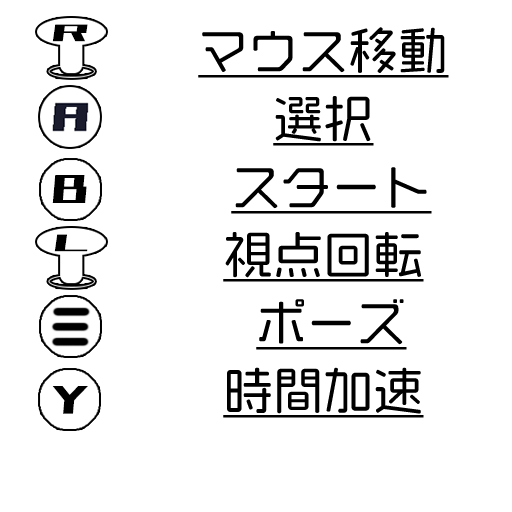
<style>
.page{position:relative;width:512px;height:512px;background:#ffffff}
.page>*{position:absolute;margin:0}
.t1{font:29.7px "851Gkktt";color:#000000;scale:1.65 1}
.t2{font:50px "VDL-GigaMaru-Medium";color:#000000;text-decoration:underline}
.t3{font:49.1px "851Gkktt";color:#000000}
</style>
<div class="page">
<p class="t1" style="left:52px;top:24px;width:36px;height:18px">R</p>
<p class="t2" style="left:198px;top:27px;width:251px;height:51px">マウス移動</p>
<p class="t2" style="left:273px;top:96px;width:101px;height:50px">選択</p>
<p class="t2" style="left:231px;top:167px;width:201px;height:47px">スタート</p>
<p class="t3" style="left:52px;top:175px;width:35px;height:28px">B</p>
<p class="t2" style="left:223px;top:232px;width:201px;height:50px">視点回転</p>
<p class="t1" style="left:54px;top:234px;width:34px;height:18px">L</p>
<p class="t2" style="left:256px;top:299px;width:151px;height:51px">ポーズ</p>
<p class="t2" style="left:223px;top:367px;width:201px;height:51px">時間加速</p>
<p class="t3" style="left:52px;top:386px;width:36px;height:28px">Y</p>
</div>
